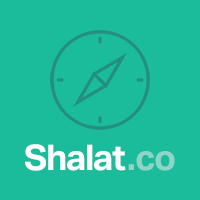
<style>
.page{position:relative;width:200px;height:200px;background:#1abc9c}
.page>*{position:absolute;margin:0}
.t1{font:35.2px "AktivGrotesk-Bold";letter-spacing:-0.035em;color:#ffffff}
.t2{font:35.2px "AktivGrotesk-Bold";letter-spacing:0.045em;color:#ffffff}
.t3{font:35.2px "AktivGrotesk-Bold";letter-spacing:-0.035em;color:#8ed5c7}
</style>
<div class="page">
<p class="t1" style="left:25px;top:144px;width:150px;height:27px">Shala<span class="t2">t</span><span class="t3">.co</span></p>
</div>
